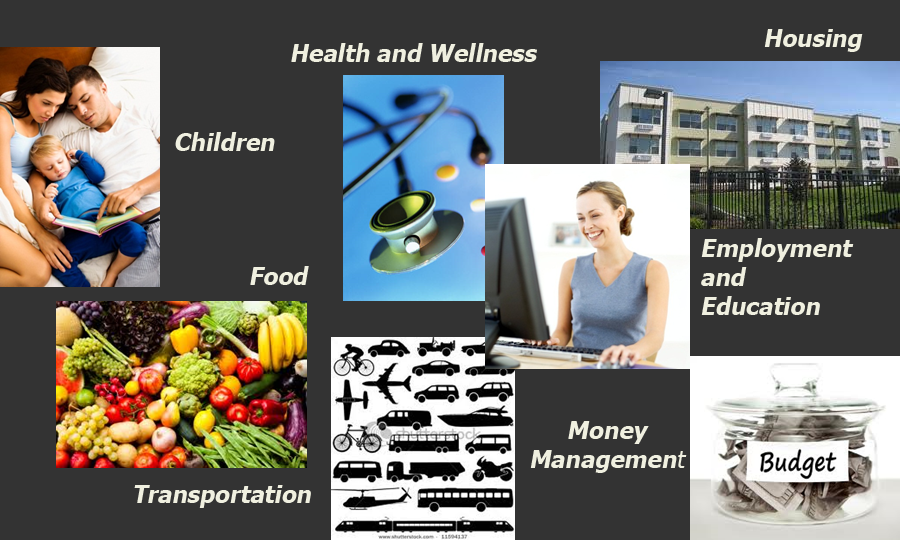
<style>
.page{position:relative;width:900px;height:540px;background:#333333}
.page>*{position:absolute;margin:0}
.t1{font:24px "Tahoma-Bold";color:#f0f0e0;font-style:italic}
.t2{font:24px "Tahoma";color:#f0f0e0;font-style:italic}
</style>
<div class="page">
<p class="t1" style="left:764px;top:29px;width:99px;height:23px">Housing</p>
<p class="t1" style="left:291px;top:43px;width:246px;height:19px">Health and Wellness</p>
<p class="t1" style="left:175px;top:132px;width:100px;height:19px">Children</p>
<p class="t1" style="left:701px;top:238px;width:153px;height:77px">Employment <br>and <br>Education</p>
<p class="t1" style="left:250px;top:266px;width:59px;height:19px">Food</p>
<p class="t1" style="left:530px;top:421px;width:157px;height:52px;text-align:center">Money <br>Managemen<span class="t2">t</span></p>
<p class="t1" style="left:134px;top:485px;width:177px;height:23px">Transportation</p>
</div>
